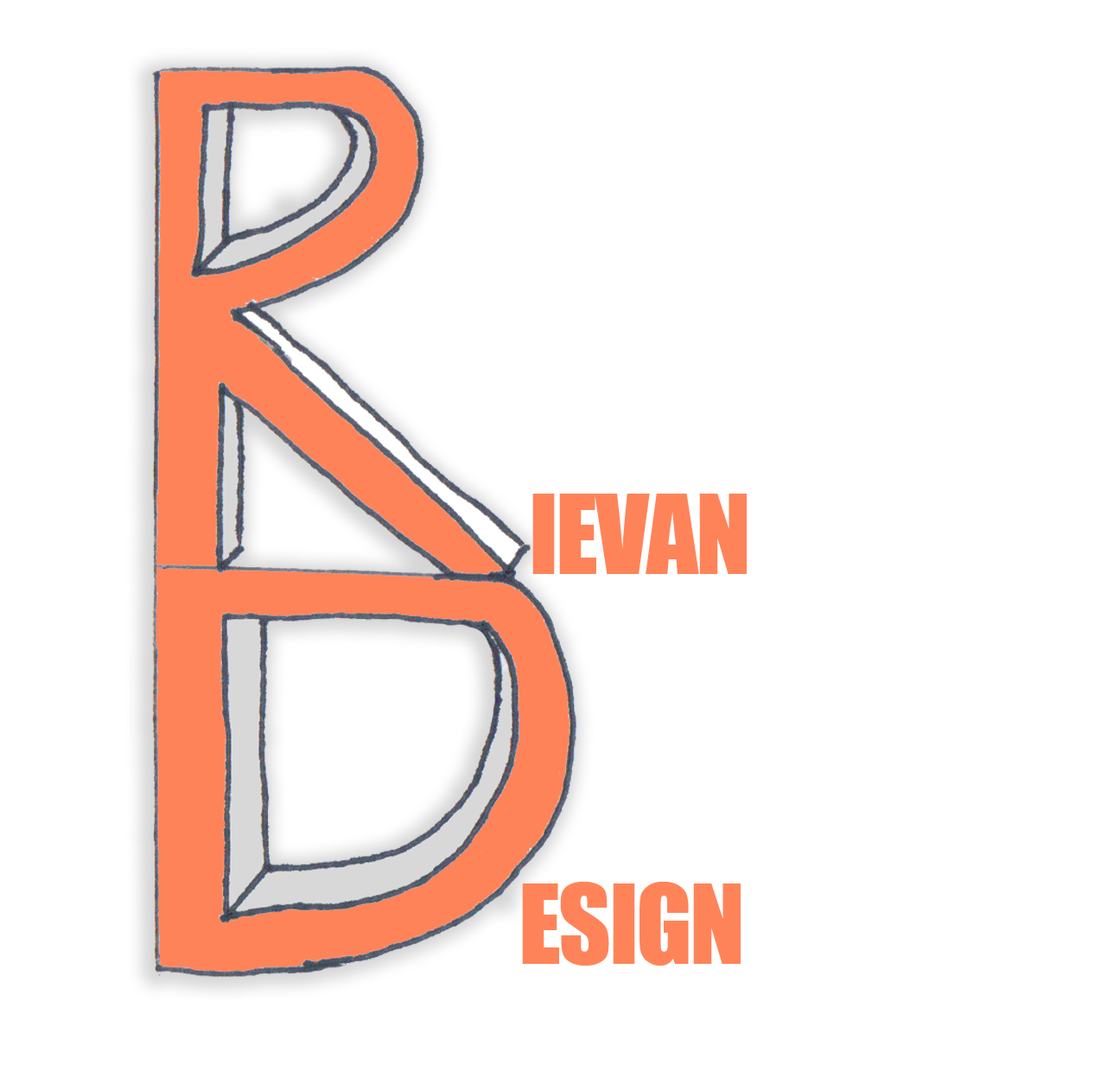
<style>
.page{position:relative;width:1120px;height:1065px;background:#ffffff}
.page>*{position:absolute;margin:0}
.t1{font:102.1px "Impact";letter-spacing:-0.025em;color:#ff8359}
</style>
<div class="page">
<p class="t1" style="left:532px;top:493px;width:215px;height:81px">IEVAN</p>
<p class="t1" style="left:522px;top:881px;width:219px;height:84px">ESIGN</p>
</div>
